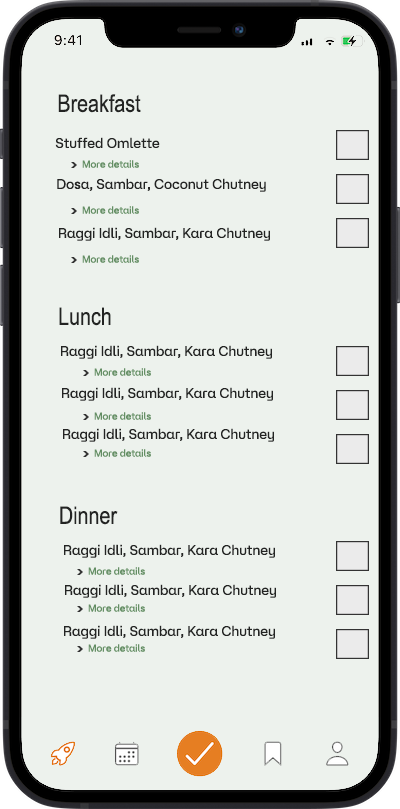
<style>
.page{position:relative;width:400px;height:809px;background:#edf2ed}
.page>*{position:absolute;margin:0}
.t1{font:24px "ArialNarrow";color:#232423}
.t2{font:14px "AtAero-Regular";color:#232423}
</style>
<div class="page">
<p class="t1" style="left:58px;top:94px;width:83px;height:19px">Breakfast</p>
<p class="t2" style="left:55px;top:137px;width:105px;height:11px">Stuffed Omlette</p>
<p class="t2" style="left:57px;top:178px;width:209px;height:14px">Dosa, Sambar, Coconut Chutney</p>
<p class="t2" style="left:59px;top:227px;width:211px;height:14px">Raggi Idli, Sambar, Kara Chutney</p>
<p class="t1" style="left:59px;top:307px;width:52px;height:19px">Lunch</p>
<p class="t2" style="left:61px;top:345px;width:211px;height:14px">Raggi Idli, Sambar, Kara Chutney</p>
<p class="t2" style="left:62px;top:387px;width:211px;height:14px">Raggi Idli, Sambar, Kara Chutney</p>
<p class="t2" style="left:63px;top:428px;width:211px;height:14px">Raggi Idli, Sambar, Kara Chutney</p>
<p class="t1" style="left:60px;top:506px;width:58px;height:19px">Dinner</p>
<p class="t2" style="left:64px;top:544px;width:211px;height:14px">Raggi Idli, Sambar, Kara Chutney</p>
<p class="t2" style="left:65px;top:584px;width:211px;height:14px">Raggi Idli, Sambar, Kara Chutney</p>
<p class="t2" style="left:64px;top:625px;width:211px;height:14px">Raggi Idli, Sambar, Kara Chutney</p>
</div>
